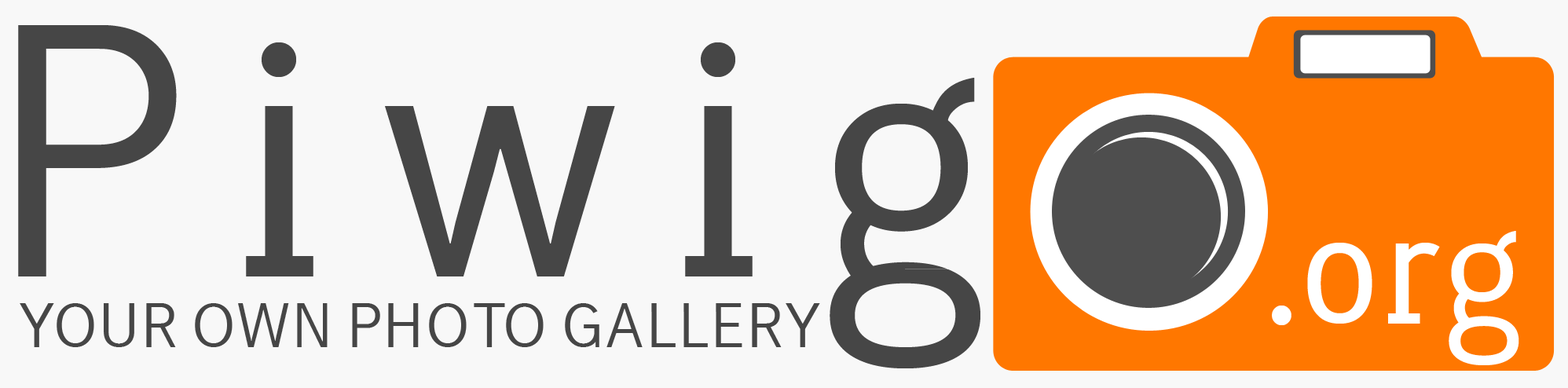
<style>
.page{position:relative;width:1568px;height:388px;background:#f8f8f8}
.page>*{position:absolute;margin:0}
.t1{font:322.1px "LacunaRegular";letter-spacing:0.15em;color:#464646}
.t2{font:149.3px "LacunaRegular";color:#ffffff}
.t3{font:56.6px "LacunaRegular";color:#464646}
</style>
<div class="page">
<p class="t1" style="left:18px;top:25px;width:962px;height:343px">Piwig</p>
<p class="t2" style="left:1272px;top:231px;width:247px;height:134px">.org</p>
<p class="t3" style="left:20px;top:303px;width:800px;height:44px">YOUR OWN PHOTO GALLERY</p>
</div>
